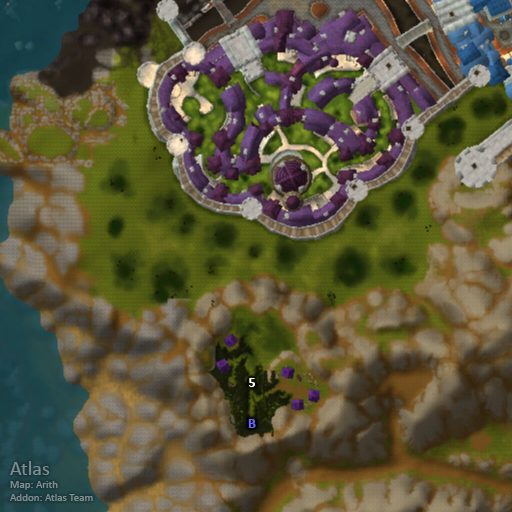
<style>
.page{position:relative;width:512px;height:512px}
.page>*{position:absolute;margin:0}
.t1{font:14px "Calibri-Bold";color:#ffffff}
.t2{font:14px "Calibri-Bold";color:#6666ff}
.t3{font:11px "Calibri";color:#7e8d8f}
.t4{font:20px "Calibri";color:#7e8d8f}
</style>
<div class="page">
<p class="t1" style="left:249px;top:378px;width:6px;height:9px">5</p>
<p class="t2" style="left:248px;top:419px;width:8px;height:9px">B</p>
<p class="t3" style="left:10px;top:461px;width:83px;height:40px"><span class="t4">Atlas<br></span>Map: Arith<br>Addon: Atlas Team</p>
</div>
